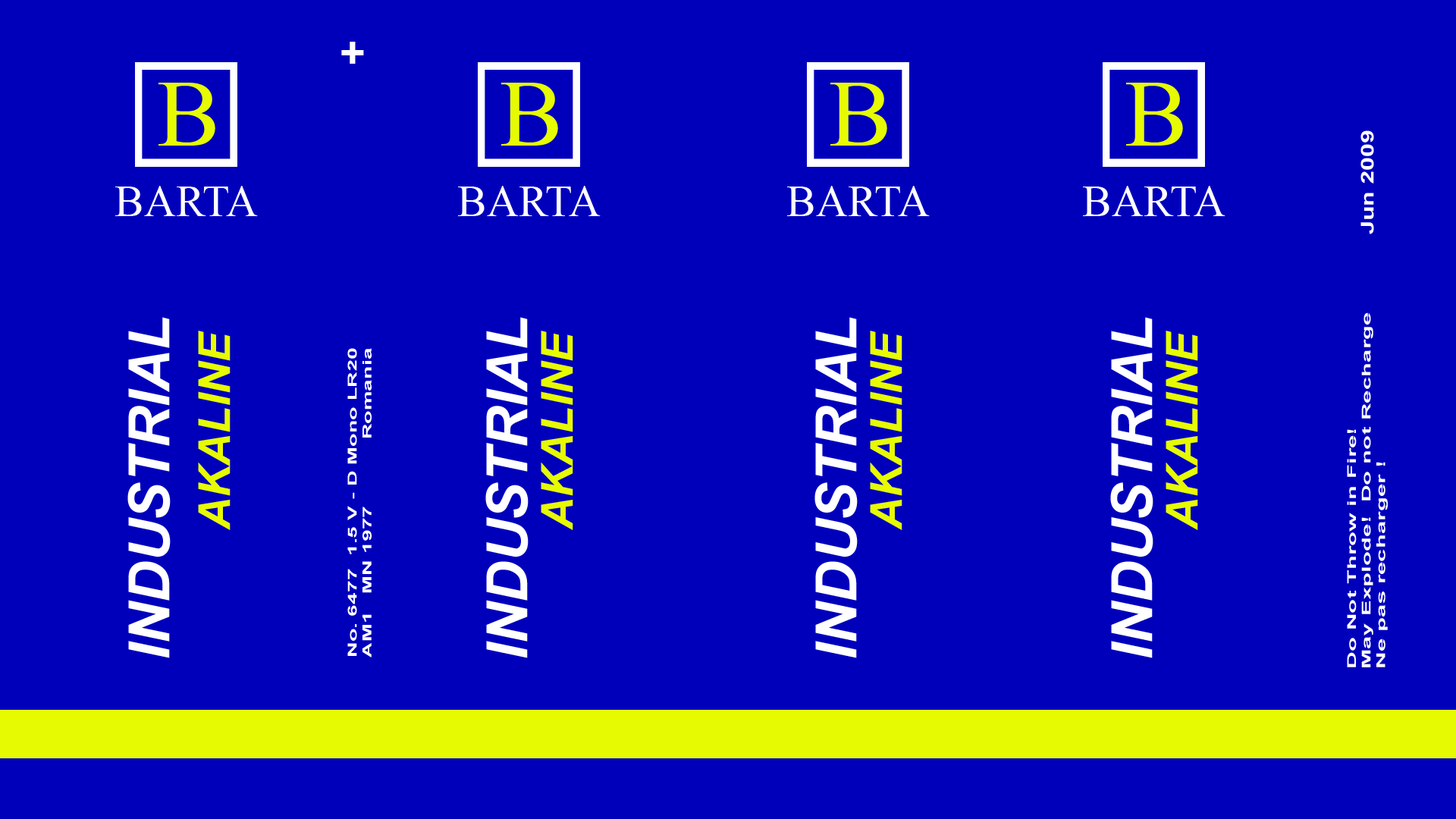
<style>
.page{position:relative;width:1456px;height:819px;background:#0000bb}
.page>*{position:absolute;margin:0}
.t1{font:44.2px "Arial-BoldMT";color:#ffffff}
.t2{font:17.7px "Arial-BoldMT";color:#ffffff;scale:1.38 1}
.t3{font:44.2px "TimesNewRomanPSMT";color:#ffffff}
.t4{font:56.9px "Arial-BoldItalicMT";color:#ffffff}
.t5{font:12.2px "Arial-BoldMT";color:#ffffff;scale:1.95 1}
.t6{font:44.2px "Arial-BoldItalicMT";color:#e6fb02}
.t7{font:12.4px "Arial-BoldMT";color:#ffffff;scale:1.75 1}
</style>
<div class="page">
<p class="t1" style="left:341px;top:42px;width:23px;height:22px">+</p>
<p class="t2" style="left:1360px;top:130px;width:14px;height:104px;rotate:-90deg">Jun 2009</p>
<p class="t3" style="left:115px;top:186px;width:143px;height:30px">BARTA</p>
<p class="t3" style="left:458px;top:186px;width:143px;height:30px">BARTA</p>
<p class="t3" style="left:787px;top:186px;width:143px;height:30px">BARTA</p>
<p class="t3" style="left:1083px;top:186px;width:142px;height:30px">BARTA</p>
<p class="t4" style="left:127px;top:317px;width:44px;height:341px;rotate:-90deg">INDUSTRIAL</p>
<p class="t4" style="left:485px;top:317px;width:44px;height:341px;rotate:-90deg">INDUSTRIAL</p>
<p class="t4" style="left:814px;top:317px;width:44px;height:341px;rotate:-90deg">INDUSTRIAL</p>
<p class="t4" style="left:1110px;top:317px;width:43px;height:341px;rotate:-90deg">INDUSTRIAL</p>
<p class="t5" style="left:1347px;top:312px;width:41px;height:355px;rotate:-90deg">Do Not Throw in Fire!<br>May Explode!  Do not Recharge<br>Ne pas recharger !</p>
<p class="t6" style="left:198px;top:331px;width:33px;height:199px;rotate:-90deg">AKALINE</p>
<p class="t6" style="left:541px;top:331px;width:32px;height:199px;rotate:-90deg">AKALINE</p>
<p class="t6" style="left:870px;top:331px;width:32px;height:199px;rotate:-90deg">AKALINE</p>
<p class="t6" style="left:1166px;top:331px;width:32px;height:199px;rotate:-90deg">AKALINE</p>
<p class="t7" style="left:347px;top:348px;width:25px;height:309px;rotate:-90deg">No. 6477  1.5 V - D Mono LR20<br>AM1   MN 1977           Romania</p>
</div>
